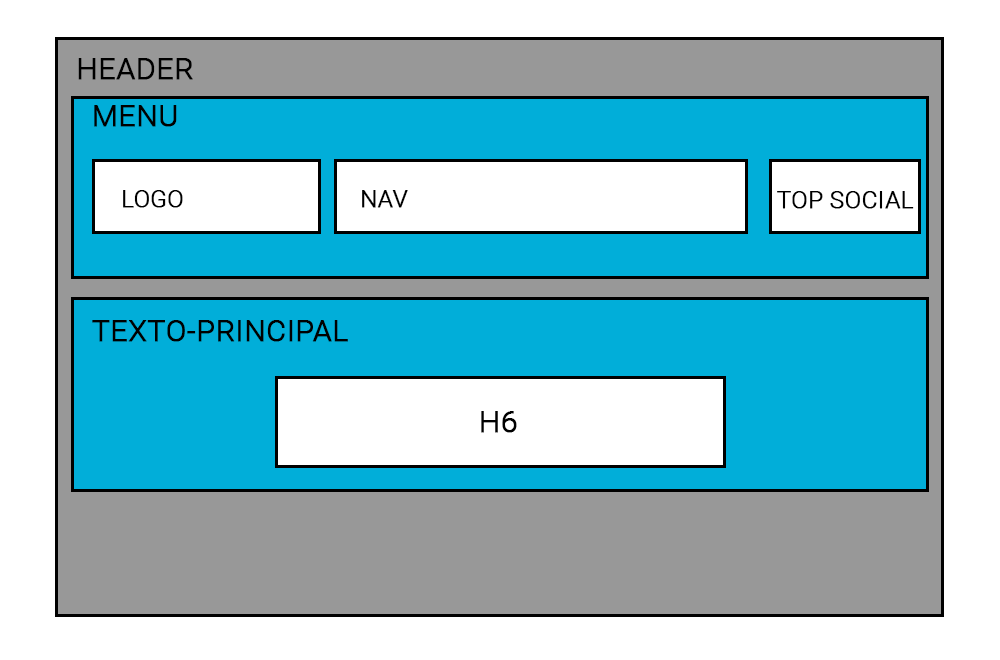
<style>
.page{position:relative;width:1000px;height:660px;background:#ffffff}
.page>*{position:absolute;margin:0}
.t1{font:30px "Roboto-Light";color:#000000;text-transform:uppercase;font-weight:bold}
.t2{font:24px "Roboto-Light";color:#000000;text-transform:uppercase;font-weight:bold}
</style>
<div class="page">
<p class="t1" style="left:78px;top:58px;width:115px;height:22px">header</p>
<p class="t1" style="left:94px;top:105px;width:83px;height:22px">menu</p>
<p class="t2" style="left:123px;top:190px;width:60px;height:18px">logo</p>
<p class="t2" style="left:362px;top:190px;width:46px;height:18px">nav</p>
<p class="t2" style="left:777px;top:191px;width:137px;height:18px">top social</p>
<p class="t1" style="left:92px;top:320px;width:256px;height:22px">texto-principal</p>
<p class="t1" style="left:481px;top:411px;width:36px;height:22px">h6</p>
</div>
